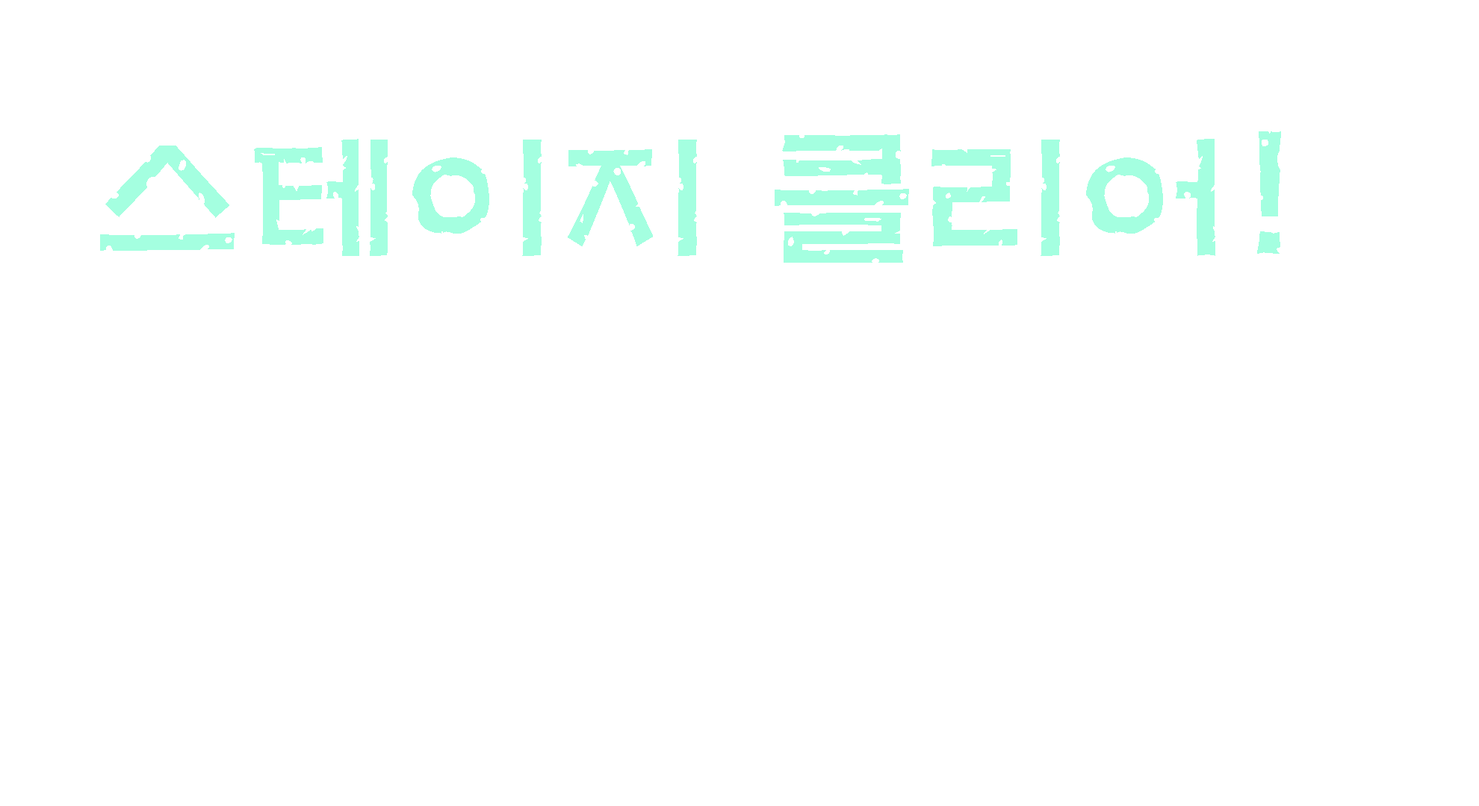
<style>
.page{position:relative;width:1479px;height:806px;background:#ffffff}
.page>*{position:absolute;margin:0}
.t1{font:155.6px "H2mkpB";color:#a4ffe0}
</style>
<div class="page">
<p class="t1" style="left:100px;top:131px;width:1181px;height:132px">스테이지 클리어!</p>
</div>
